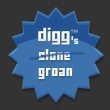
<style>
.page{position:relative;width:110px;height:110px;background:#333333}
.page>*{position:absolute;margin:0}
.t1{font:6px "FFFForward";letter-spacing:0.05em;color:#e6edf4}
.t2{font:9px "FFFForward";letter-spacing:0.05em;color:#f5f5f5}
</style>
<div class="page">
<p class="t1" style="left:71px;top:36px;width:8px;height:9px">‘s</p>
<p class="t2" style="left:38px;top:49px;width:32px;height:11px">clone</p>
<p class="t2" style="left:38px;top:68px;width:35px;height:11px">groan</p>
</div>
